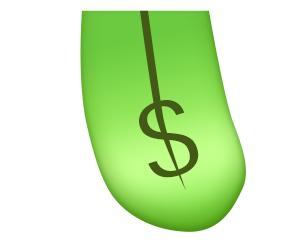
<style>
.page{position:relative;width:284px;height:242px;background:#ffffff}
.page>*{position:absolute;margin:0}
.t1{font:110px "AcuminConcept-CondensedLight";letter-spacing:0.025em;color:#435916;text-transform:uppercase;scale:1.3 1}
</style>
<div class="page">
<p class="t1" style="left:139px;top:100px;width:60px;height:78px;rotate:-17deg">S</p>
</div>
